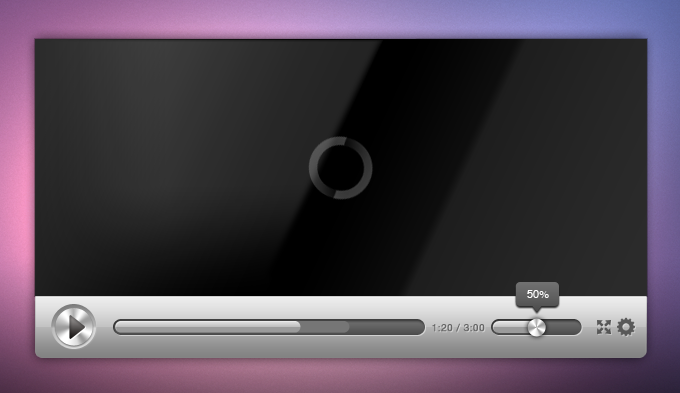
<style>
.page{position:relative;width:680px;height:393px}
.page>*{position:absolute;margin:0}
.t1{font:11px "Helvetica";color:#ffffff}
.t2{font:10px "HelveticaNeue";letter-spacing:0.025em;color:#666666;font-weight:bold}
</style>
<div class="page">
<p class="t1" style="left:527px;top:290px;width:22px;height:8px">50%</p>
<p class="t2" style="left:432px;top:323px;width:53px;height:9px">1:20 / 3:00</p>
</div>
